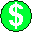
<style>
.page{position:relative;width:32px;height:32px;background:#00ff33}
.page>*{position:absolute;margin:0}
.t1{font:30px "Arial-BoldMT";color:#ffffff}
</style>
<div class="page">
<p class="t1" style="left:9px;top:2px;width:14px;height:27px">$</p>
</div>
